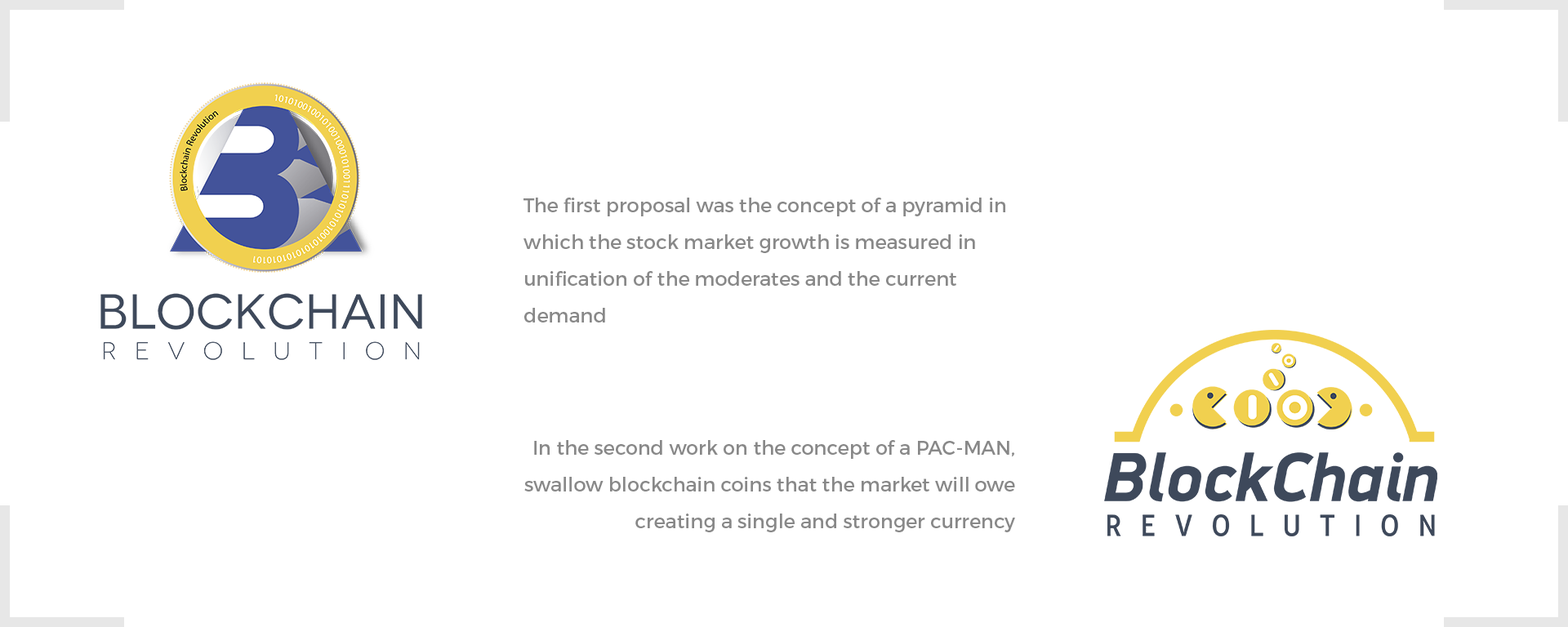
<style>
.page{position:relative;width:1568px;height:627px;background:#ffffff}
.page>*{position:absolute;margin:0}
.t1{font:19.6px/36.7px "Montserrat-Regular";color:#888888}
</style>
<div class="page">
<p class="t1" style="left:523px;top:198px;width:482px;height:125px">The first proposal was the concept of a pyramid in which the stock market growth is measured in unification of the moderates and the current demand</p>
<p class="t1" style="left:524px;top:440px;width:491px;height:92px;text-align:right">In the second work on the concept of a PAC-MAN, swallow blockchain coins that the market will owe creating a single and stronger currency</p>
</div>
